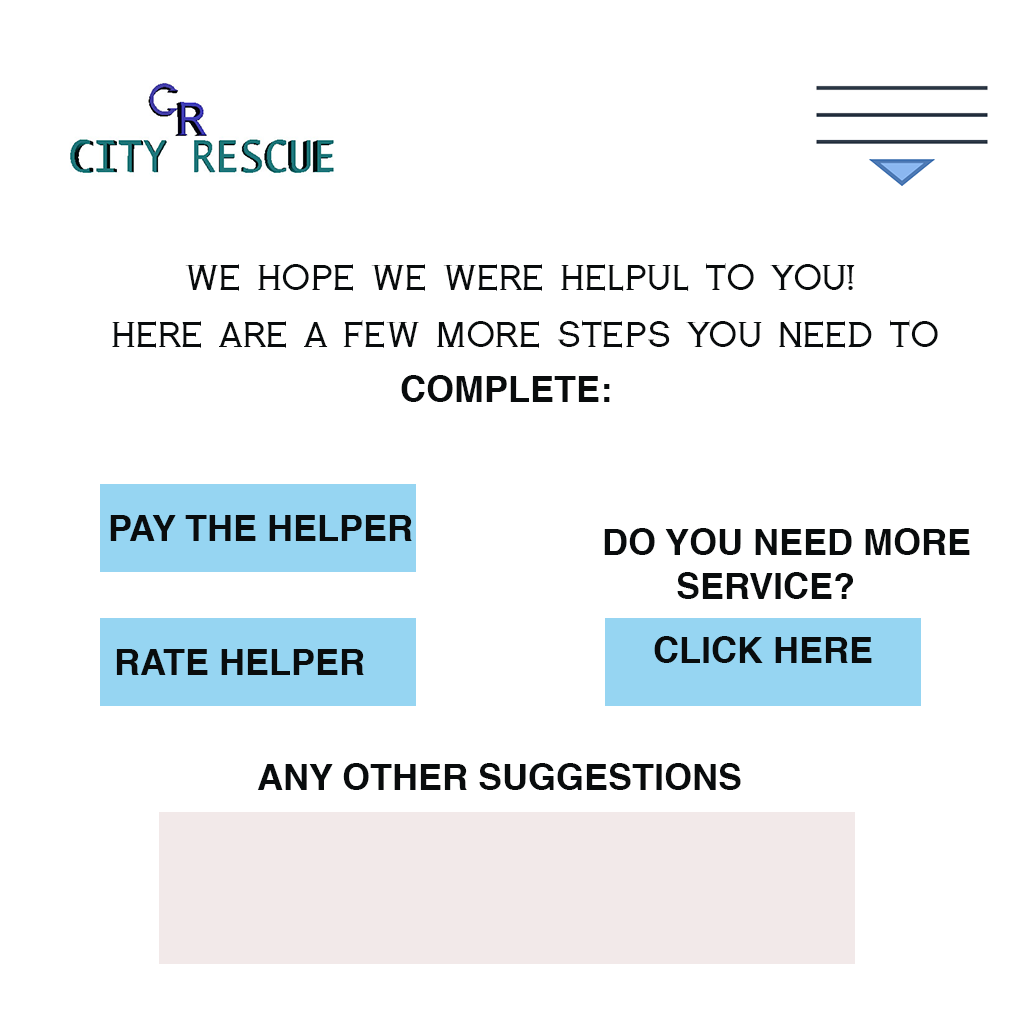
<style>
.page{position:relative;width:1024px;height:1024px;background:#ffffff}
.page>*{position:absolute;margin:0}
.t1{font:36px "RoyalSerif";color:#090c0d;text-transform:uppercase}
.t2{font:36px "Helvetica-Bold";color:#090c0d;text-transform:uppercase}
</style>
<div class="page">
<p class="t1" style="left:185px;top:263px;width:670px;height:28px">we hope we were helpul to you!</p>
<p class="t1" style="left:112px;top:320px;width:826px;height:28px">here are a few more steps you need to</p>
<p class="t2" style="left:401px;top:375px;width:209px;height:27px">complete:</p>
<p class="t2" style="left:110px;top:515px;width:302px;height:26px">pay the helper</p>
<p class="t2" style="left:604px;top:528px;width:366px;height:27px">do you need more</p>
<p class="t2" style="left:677px;top:572px;width:176px;height:27px">service?</p>
<p class="t2" style="left:654px;top:636px;width:218px;height:27px">click here</p>
<p class="t2" style="left:116px;top:649px;width:248px;height:26px">rate helper</p>
<p class="t2" style="left:257px;top:763px;width:484px;height:27px">any other suggestions</p>
</div>
